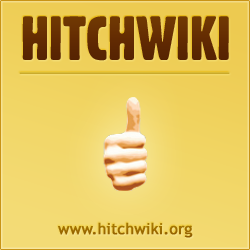
<style>
.page{position:relative;width:250px;height:250px}
.page>*{position:absolute;margin:0}
.t1{font:60.8px "Gothic821CondensedBT-Regular";color:#632b02;text-transform:uppercase}
.t2{font:15.2px "TrebuchetMS";color:#9d6b00;font-weight:bold}
</style>
<div class="page">
<p class="t1" style="left:22px;top:16px;width:207px;height:45px">Hitchwiki</p>
<p class="t2" style="left:58px;top:222px;width:135px;height:16px">www.hitchwiki.org</p>
</div>
